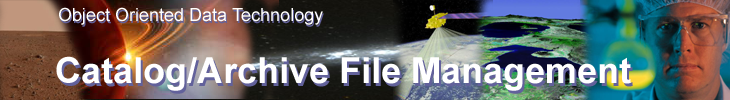
<style>
.page{position:relative;width:730px;height:100px}
.page>*{position:absolute;margin:0}
.t1{font:18px "ArialMT";color:#ffffff}
.t2{font:18px "ArialMT"}
.t3{font:36px "Arial-BoldMT";color:#ffffff}
.t4{font:36px "Arial-BoldMT"}
</style>
<div class="page">
<p class="t1" style="left:59px;top:7px;width:264px;height:18px">Object Oriented Data Technology</p>
<p class="t2" style="left:60px;top:9px;width:264px;height:18px">Object Oriented Data Technology</p>
<p class="t3" style="left:56px;top:56px;width:575px;height:35px">Catalog/Archive File Management</p>
<p class="t4" style="left:58px;top:59px;width:575px;height:35px">Catalog/Archive File Management</p>
</div>
